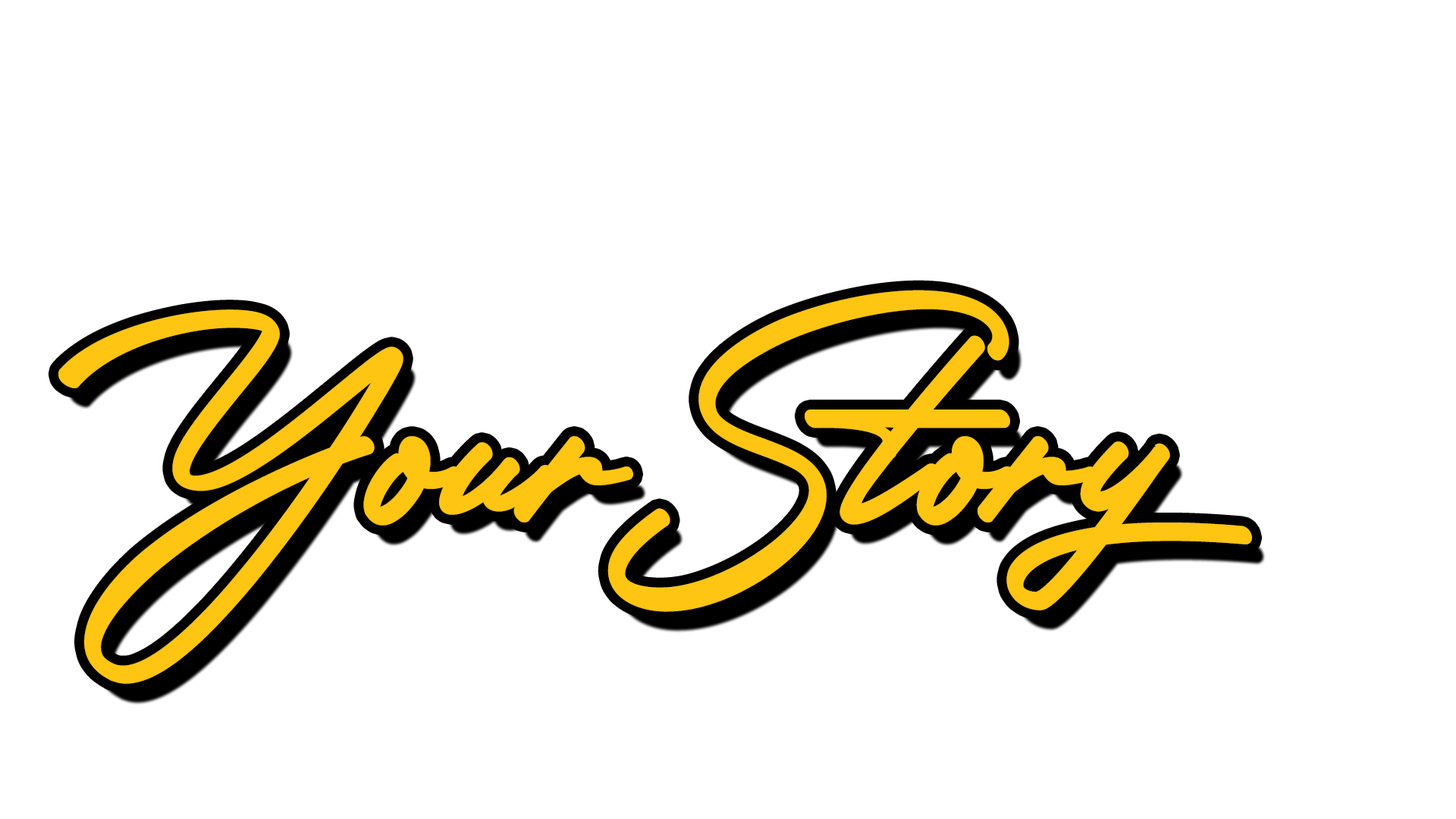
<style>
.page{position:relative;width:1456px;height:819px;background:#ffffff}
.page>*{position:absolute;margin:0}
.t1{font:294.1px "PhotographSignature";color:#ffc513;font-weight:bold;font-style:italic}
</style>
<div class="page">
<p class="t1" style="left:58px;top:290px;width:1194px;height:394px">YourStory</p>
</div>
